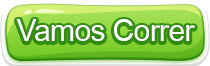
<style>
.page{position:relative;width:210px;height:66px}
.page>*{position:absolute;margin:0}
.t1{font:30px "DokChampa";letter-spacing:-0.02em;color:#ffffff}
</style>
<div class="page">
<p class="t1" style="left:16px;top:19px;width:179px;height:22px">Vamos Correr</p>
</div>
